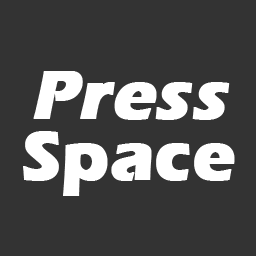
<style>
.page{position:relative;width:256px;height:256px;background:#333333}
.page>*{position:absolute;margin:0}
.t1{font:70.5px/61.8px "ErasITC-Bold";color:#ffffff;font-weight:bold;font-style:italic}
.t2{font:70.5px/61.8px "ErasITC-Bold";color:#ffffff;font-weight:bold}
</style>
<div class="page">
<p class="t1" style="left:23px;top:71px;width:212px;height:125px;text-align:center">Press<br><span class="t2">Space</span></p>
</div>
